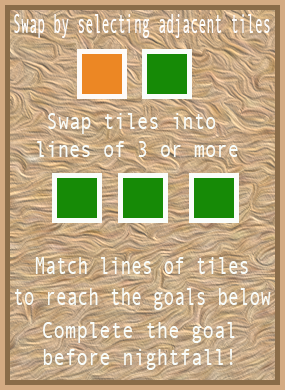
<style>
.page{position:relative;width:285px;height:390px}
.page>*{position:absolute;margin:0}
.t1{font:27.3px "AndaleMono";color:#fefdfb;scale:0.49 1}
.t2{font:23.4px "AndaleMono";color:#f9fdf9;scale:0.81 1}
.t3{font:25.2px "AndaleMono";color:#f9fdf9;scale:0.71 1}
.t4{font:22.5px "AndaleMono";color:#f9fdf9;scale:0.85 1}
</style>
<div class="page">
<p class="t1" style="left:14px;top:14px;width:256px;height:24px">Swap by selecting adjacent tiles</p>
<p class="t2" style="left:37px;top:113px;width:201px;height:44px;text-align:center">Swap tiles into <br>lines of 3 or more</p>
<p class="t3" style="left:15px;top:257px;width:256px;height:53px;text-align:center">Match lines of tiles<br>to reach the goals below</p>
<p class="t4" style="left:43px;top:322px;width:192px;height:48px;text-align:center">Complete the goal<br>before nightfall!</p>
</div>
